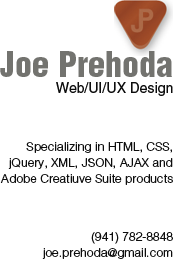
<style>
.page{position:relative;width:173px;height:260px;background:#ffffff}
.page>*{position:absolute;margin:0}
.t1{font:34px "HelveticaLTStd-BlkCond";color:#73736f}
.t2{font:14px "HelveticaLTStd-Roman";color:#0d0d0d}
.t3{font:12px/16px "HelveticaLTStd-Light";color:#0d0d0d}
</style>
<div class="page">
<p class="t1" style="left:0px;top:51px;width:172px;height:26px">Joe Prehoda</p>
<p class="t2" style="left:56px;top:82px;width:117px;height:14px">Web/UI/UX Design</p>
<p class="t3" style="left:0px;top:142px;width:173px;height:43px;text-align:right">Specializing in HTML, CSS, jQuery, XML, JSON, AJAX and Adobe Creatiuve Suite products</p>
<p class="t3" style="left:42px;top:232px;width:131px;height:27px;text-align:right">(941) 782-8848<br>joe.prehoda@gmail.com</p>
</div>
